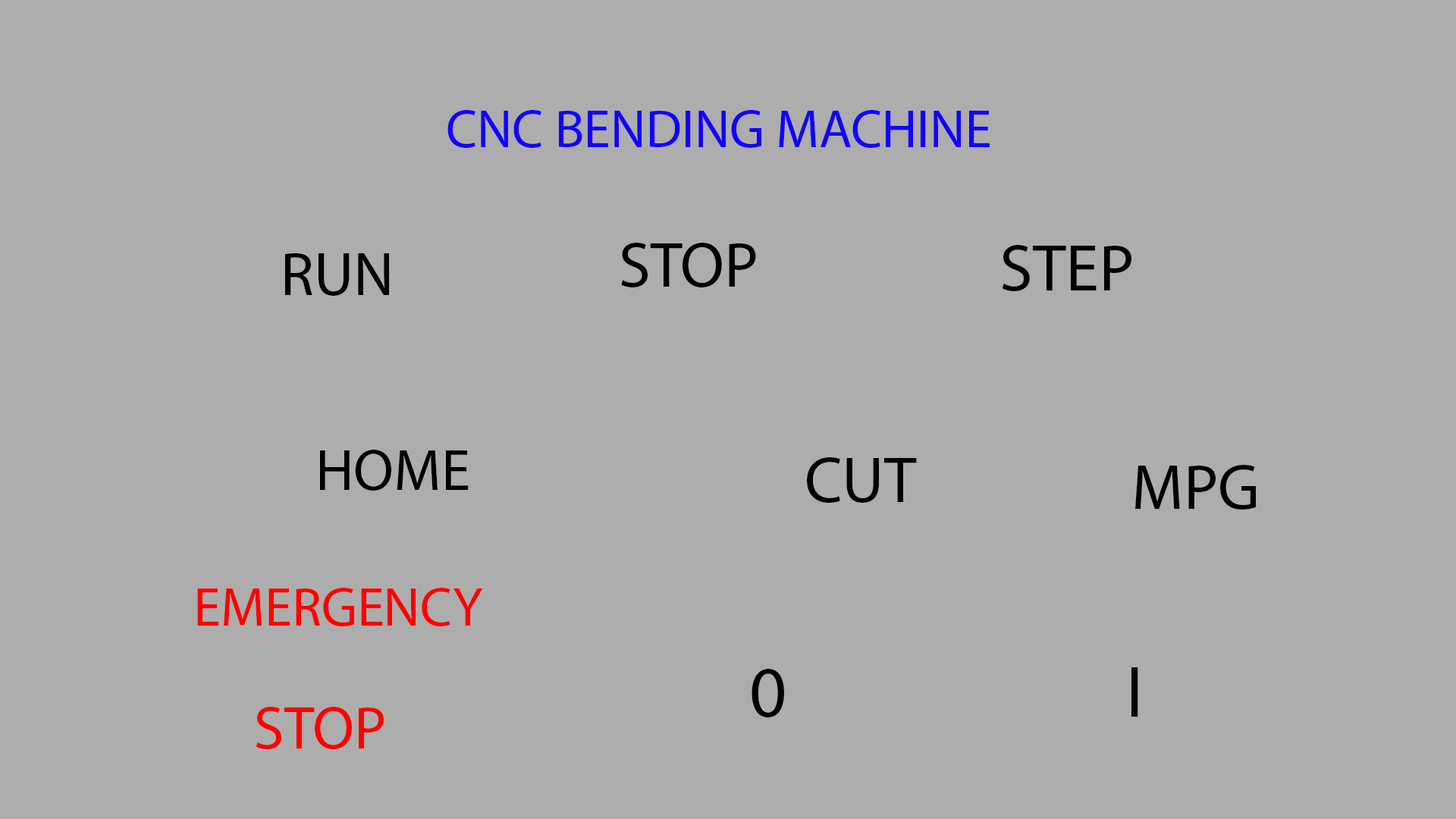
<style>
.page{position:relative;width:1456px;height:819px;background:#adadad}
.page>*{position:absolute;margin:0}
.t1{font:53.8px "MyriadPro-Regular";color:#1200ff}
.t2{font:63.8px "MyriadPro-Regular";color:#000000}
.t3{font:66.7px "MyriadPro-Regular";color:#000000}
.t4{font:61.6px "MyriadPro-Regular";color:#000000}
.t5{font:58.6px "MyriadPro-Regular";color:#000000}
.t6{font:64.9px "MyriadPro-Regular";color:#000000}
.t7{font:64.5px "MyriadPro-Regular";color:#000000}
.t8{font:55.1px "MyriadPro-Regular";color:#ff0000}
.t9{font:72.8px "MyriadPro-Regular";color:#000000}
.t10{font:60.6px "MyriadPro-Regular";color:#ff0000}
</style>
<div class="page">
<p class="t1" style="left:447px;top:110px;width:543px;height:38px">CNC BENDING MACHINE</p>
<p class="t2" style="left:621px;top:243px;width:135px;height:44px">STOP</p>
<p class="t3" style="left:1002px;top:245px;width:129px;height:46px">STEP</p>
<p class="t4" style="left:285px;top:253px;width:104px;height:43px">RUN</p>
<p class="t5" style="left:320px;top:450px;width:149px;height:41px">HOME</p>
<p class="t6" style="left:807px;top:457px;width:110px;height:46px">CUT</p>
<p class="t7" style="left:1135px;top:465px;width:121px;height:45px">MPG</p>
<p class="t8" style="left:197px;top:588px;width:286px;height:38px">EMERGENCY</p>
<p class="t9" style="left:751px;top:667px;width:387px;height:50px">0                      I</p>
<p class="t10" style="left:256px;top:707px;width:128px;height:42px">STOP</p>
</div>
